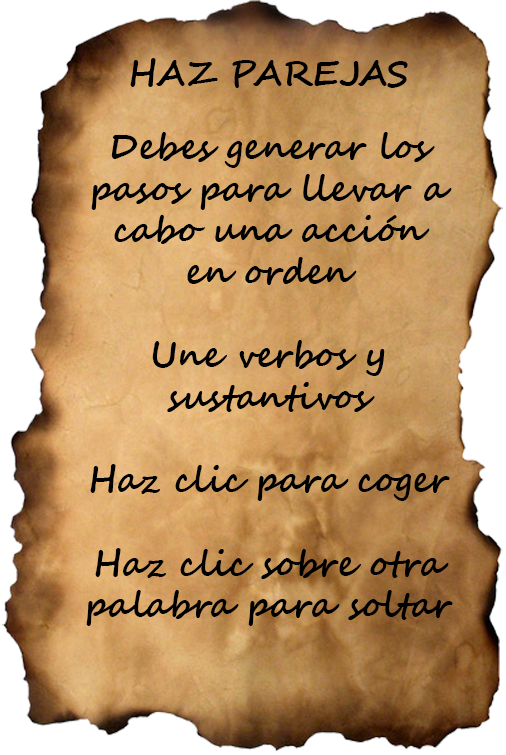
<style>
.page{position:relative;width:506px;height:755px}
.page>*{position:absolute;margin:0}
.t1{font:34.7px "SegoeScript-Bold";color:#000000}
</style>
<div class="page">
<p class="t1" style="left:130px;top:58px;width:278px;height:30px">HAZ PAREJAS</p>
<p class="t1" style="left:86px;top:132px;width:367px;height:494px;text-align:center">Debes generar los<br>pasos para llevar a<br>cabo una acción<br>en orden<br><br>Une verbos y<br>sustantivos<br><br>Haz clic para coger<br><br>Haz clic sobre otra<br>palabra para soltar</p>
</div>
